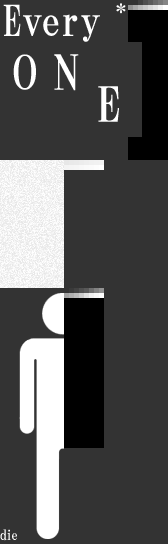
<style>
.page{position:relative;width:168px;height:544px;background:#333333}
.page>*{position:absolute;margin:0}
.t1{font:42px "HGMinchoB";letter-spacing:-0.01em;color:#ffffff}
.t2{font:48px "HGMinchoB";letter-spacing:-0.025em;color:#ffffff;scale:1.1 1}
.t3{font:48px "HGMinchoB";color:#ffffff;scale:1.1 1}
.t4{font:14px "HGMinchoB";letter-spacing:-0.1em;color:#ffffff}
</style>
<div class="page">
<p class="t1" style="left:3px;top:4px;width:97px;height:38px">Every</p>
<p class="t2" style="left:13px;top:54px;width:66px;height:37px">O N</p>
<p class="t3" style="left:98px;top:86px;width:21px;height:36px">E</p>
<p class="t4" style="left:0px;top:529px;width:17px;height:12px">die</p>
</div>
